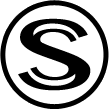
<style>
.page{position:relative;width:109px;height:109px;background:#ffffff}
.page>*{position:absolute;margin:0}
.t1{font:100.3px "BanglaMN";color:#000000;scale:1.48 1}
.t2{font:72.2px "BanglaMN";color:#000000;scale:1.37 1}
</style>
<div class="page">
<p class="t1" style="left:18px;top:18px;width:73px;height:73px">S</p>
<p class="t2" style="left:30px;top:28px;width:49px;height:53px">S</p>
</div>
